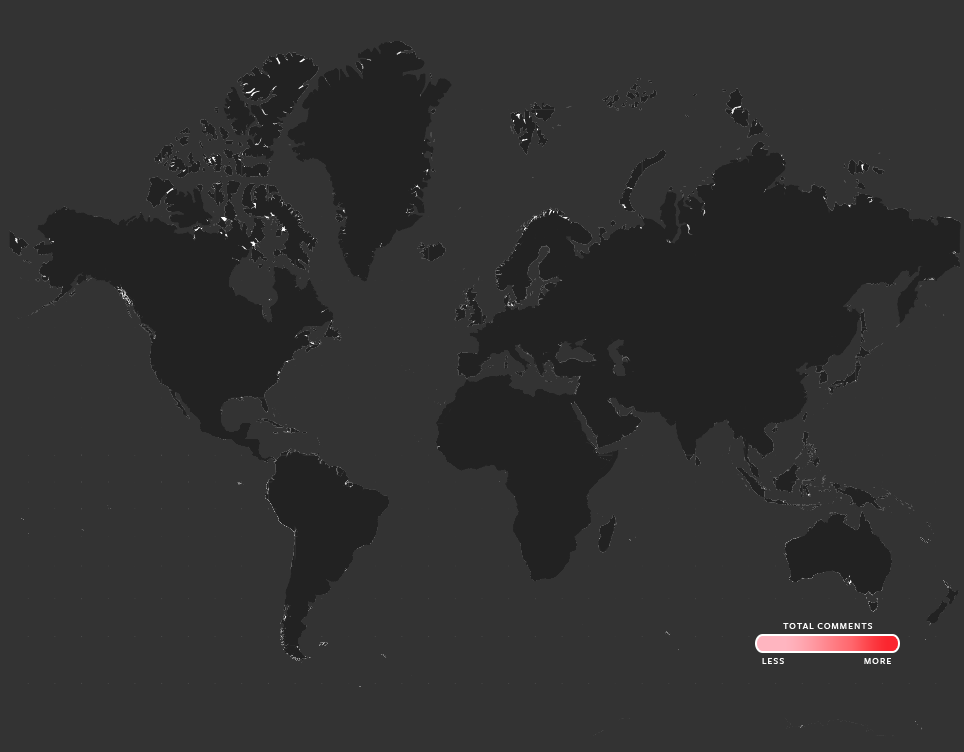
<style>
.page{position:relative;width:964px;height:752px;background:#333333}
.page>*{position:absolute;margin:0}
.t1{font:12px "FreightSans-MediumSC";letter-spacing:0.06em;color:#fdfdfd}
</style>
<div class="page">
<p class="t1" style="left:783px;top:623px;width:90px;height:6px">total comments</p>
<p class="t1" style="left:762px;top:658px;width:22px;height:6px">less</p>
<p class="t1" style="left:864px;top:658px;width:27px;height:6px">more</p>
</div>
